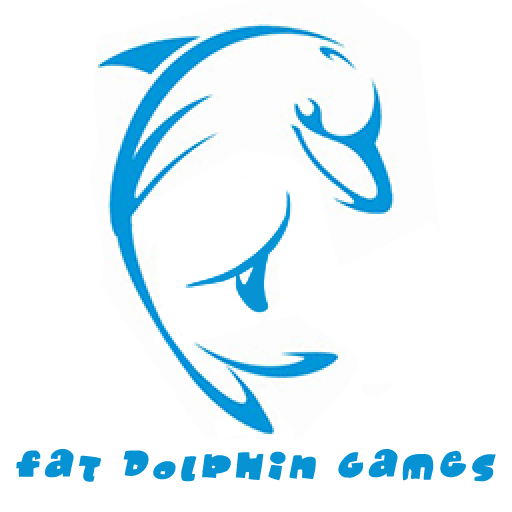
<style>
.page{position:relative;width:512px;height:512px;background:#ffffff}
.page>*{position:absolute;margin:0}
.t1{font:45px "Monafont";letter-spacing:0.1em;color:#0792d3;font-weight:bold;font-style:italic}
</style>
<div class="page">
<p class="t1" style="left:16px;top:449px;width:480px;height:33px">Fat Dolphin Games</p>
</div>
